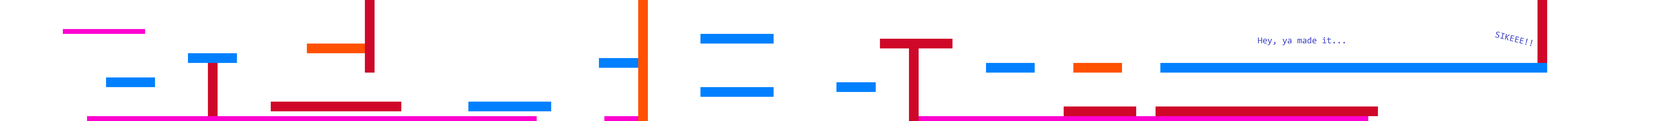
<style>
.page{position:relative;width:1662px;height:121px;background:#ffffff}
.page>*{position:absolute;margin:0}
.t1{font:9px "Consolas";color:#4245c5}
</style>
<div class="page">
<p class="t1" style="left:1258px;top:37px;width:87px;height:8px">Hey, ya made it...</p>
</div>
